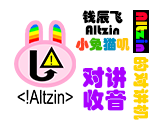
<style>
.page{position:relative;width:160px;height:128px;background:#ffffff}
.page>*{position:absolute;margin:0}
.t1{font:13.7px/13.7px "STHupo";color:#000000}
.t2{font:13.7px/13.7px "STHupo";color:#ff4324}
.t3{font:13.7px/13.7px "STHupo";color:#37b700}
.t4{font:13.7px/13.7px "STHupo";color:#0092c3}
.t5{font:13.7px/13.7px "STHupo";color:#ffc505}
.t6{font:16px "STHupo";color:#ffd400}
.t7{font:16px "STHupo";color:#ff002a}
.t8{font:16px "STHupo";color:#ffd900}
.t9{font:16px "STHupo";color:#eeff00}
.t10{font:16px "STHupo";color:#09ff00}
.t11{font:16px "STHupo";color:#002bff}
.t12{font:16px "STHupo";color:#aa00ff}
.t13{font:22.5px/22.5px "STHupo";color:#aa00ff}
</style>
<div class="page">
<p class="t1" style="left:75px;top:10px;width:55px;height:41px;text-align:center">钱辰飞<br>Altzin<br><span class="t2">小</span><span class="t3">兔</span><span class="t4">猫</span><span class="t5">叽</span></p>
<p class="t6" style="left:133px;top:12px;width:16px;height:108px;rotate:90deg"><span class="t7">A</span><span class="t8">l</span><span class="t9">t</span><span class="t10">z</span><span class="t11">i</span><span class="t12">n </span>的对讲机</p>
<p class="t13" style="left:82px;top:66px;width:45px;height:45px;text-align:center">对讲<br>收音</p>
</div>
